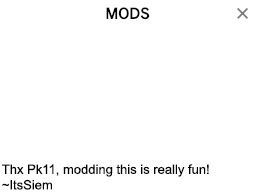
<style>
.page{position:relative;width:256px;height:192px;background:#ffffff}
.page>*{position:absolute;margin:0}
.t1{font:13px "ArialMT";color:#000000}
</style>
<div class="page">
<p class="t1" style="left:2px;top:164px;width:207px;height:26px">Thx Pk11, modding this is really fun!<br>~ItsSiem</p>
</div>
